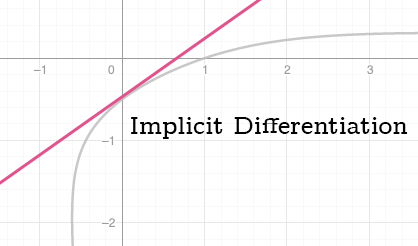
<style>
.page{position:relative;width:418px;height:246px;background:#ffffff}
.page>*{position:absolute;margin:0}
.t1{font:24px "CMUConcrete-Bold";color:#000000}
</style>
<div class="page">
<p class="t1" style="left:131px;top:117px;width:277px;height:22px">Implicit Differentiation</p>
</div>
